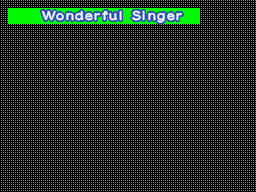
<style>
.page{position:relative;width:256px;height:192px;background:#000000}
.page>*{position:absolute;margin:0}
.t1{font:16.5px "DFLeiShoStd-W5";letter-spacing:0.075em;color:#ffffff}
</style>
<div class="page">
<p class="t1" style="left:42px;top:11px;width:140px;height:12px">Wonderful Singer</p>
</div>
